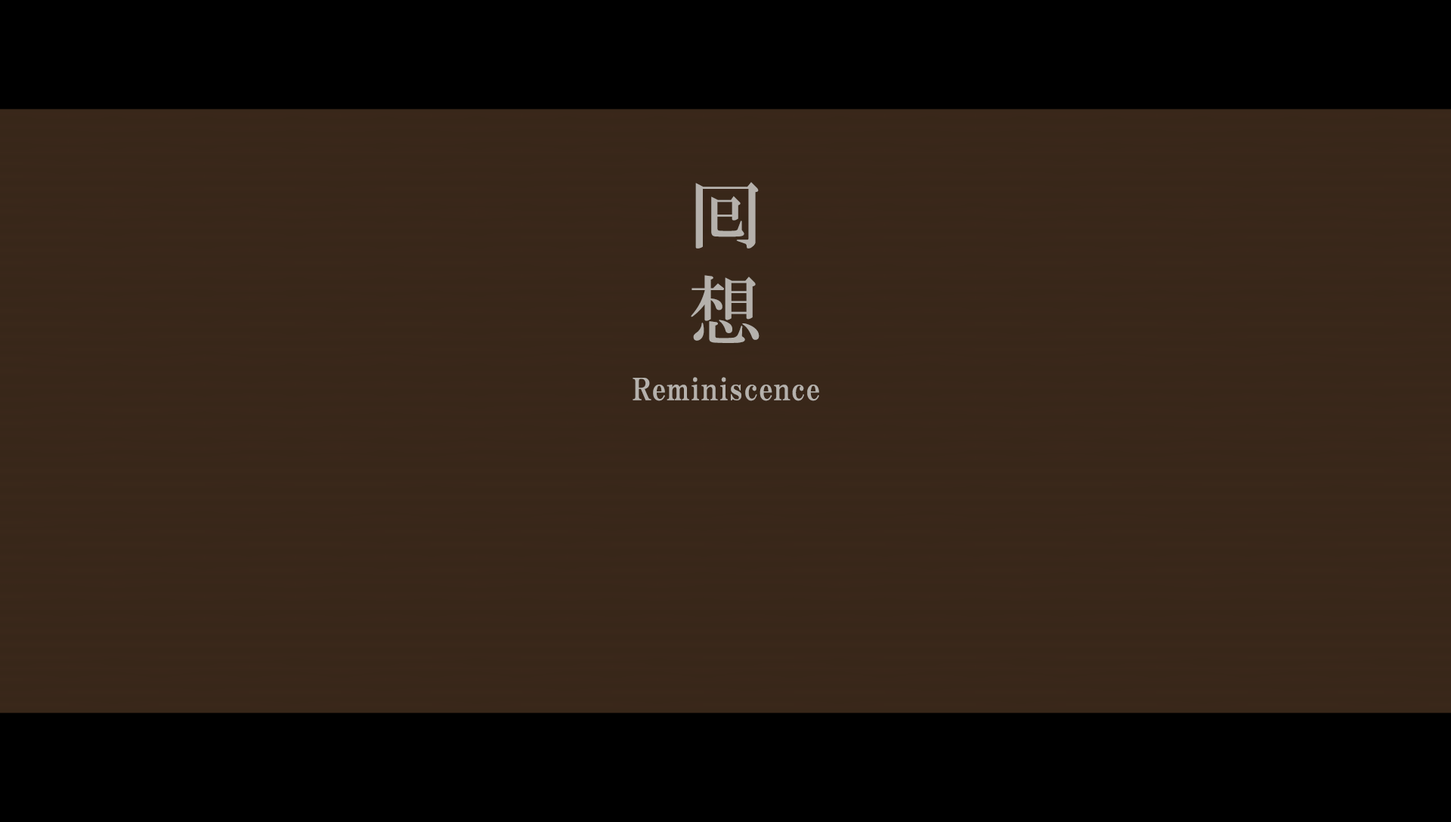
<style>
.page{position:relative;width:1451px;height:822px;background:#39271a}
.page>*{position:absolute;margin:0}
.t1{font:74.8px/95.2px "HGMinchoB";letter-spacing:0.51em;color:#b5b1ac}
.t2{font:30.2px "HGPMinchoE";letter-spacing:0.025em;color:#b5b1ac}
</style>
<div class="page">
<p class="t1" style="left:691px;top:182px;width:68px;height:161px">囘<br>想</p>
<p class="t2" style="left:632px;top:377px;width:187px;height:24px">Reminiscence</p>
</div>
